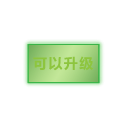
<style>
.page{position:relative;width:128px;height:128px;background:#ffffff}
.page>*{position:absolute;margin:0}
.t1{font:14px "MicrosoftYaHei-Bold";letter-spacing:0.1em;color:#8dc53e}
</style>
<div class="page">
<p class="t1" style="left:33px;top:56px;width:60px;height:15px">可以升级</p>
</div>
